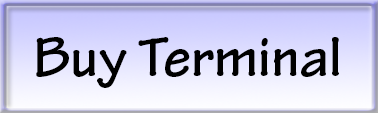
<style>
.page{position:relative;width:378px;height:113px}
.page>*{position:absolute;margin:0}
.t1{font:60px "TektonPro-Bold";color:#000000}
</style>
<div class="page">
<p class="t1" style="left:36px;top:37px;width:303px;height:51px">Buy Terminal</p>
</div>
